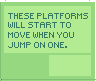
<style>
.page{position:relative;width:96px;height:81px;background:#b3eb92}
.page>*{position:absolute;margin:0}
.t1{font:8px "Small-Pixel";color:#367a63}
</style>
<div class="page">
<p class="t1" style="left:8px;top:13px;width:80px;height:35px">these platforms<br>will start to <br>move when you <br>jump on one.</p>
</div>
